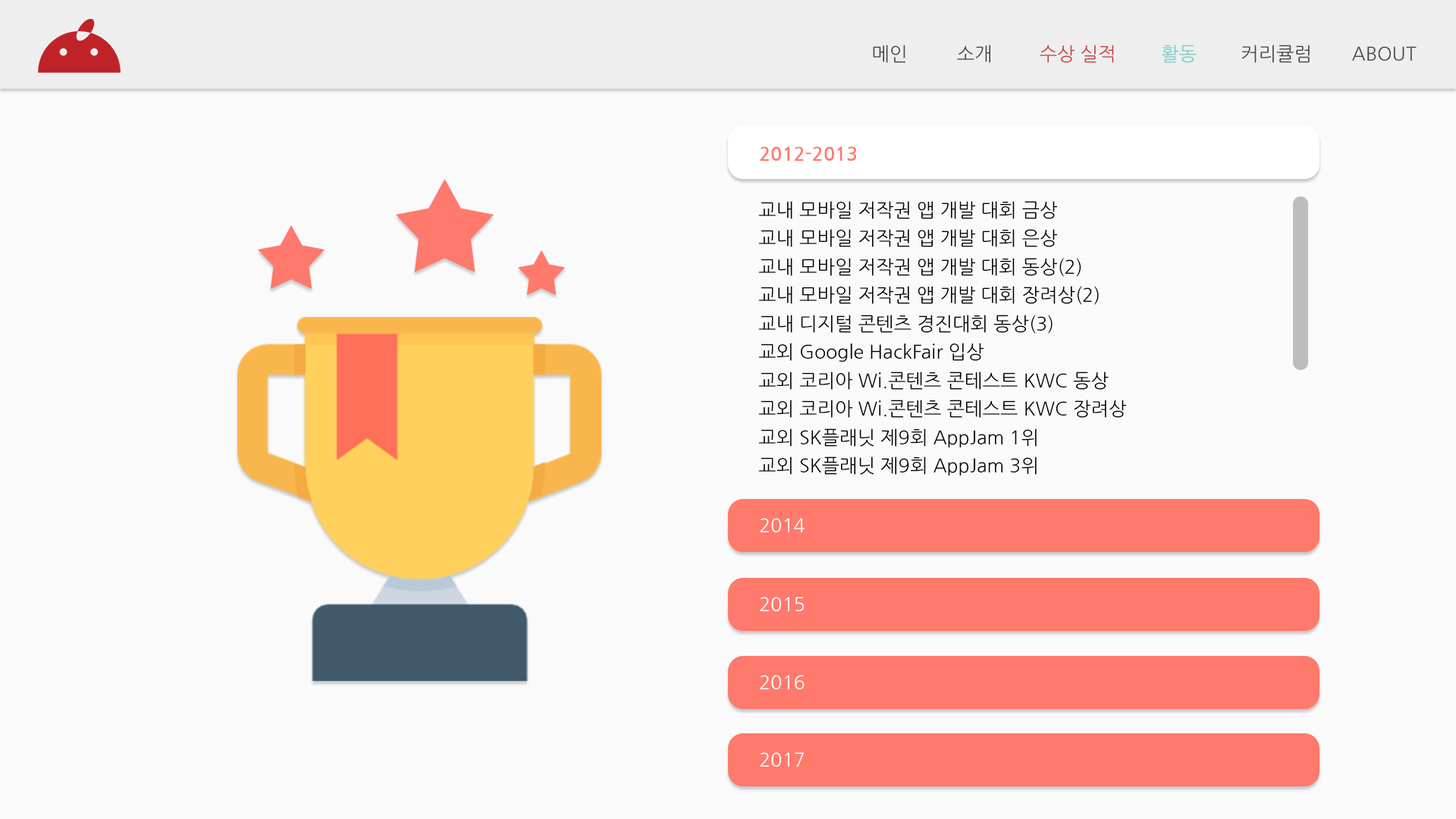
<style>
.page{position:relative;width:1456px;height:819px;background:#fafafa}
.page>*{position:absolute;margin:0}
.t1{font:19px "NanumGothic";color:#464646}
.t2{font:19px "NanumGothic";color:#cb3d3d}
.t3{font:19px "NanumGothic";color:#7accc8}
.t4{font:19px "NanumGothicBold";color:#ff796c}
.t5{font:19px/28.4px "NanumGothic";color:#000000}
.t6{font:19px "NanumGothic";color:#ffffff}
</style>
<div class="page">
<p class="t1" style="left:873px;top:45px;width:32px;height:18px">메인</p>
<p class="t1" style="left:957px;top:45px;width:33px;height:18px">소개</p>
<p class="t2" style="left:1040px;top:45px;width:74px;height:18px">수상 실적</p>
<p class="t3" style="left:1162px;top:45px;width:35px;height:18px">활동</p>
<p class="t1" style="left:1241px;top:45px;width:69px;height:18px">커리큘럼</p>
<p class="t1" style="left:1352px;top:46px;width:65px;height:15px">ABOUT</p>
<p class="t4" style="left:760px;top:146px;width:96px;height:15px">2012-2013</p>
<p class="t5" style="left:758px;top:201px;width:430px;height:331px">교내 모바일 저작권 앱 개발 대회 금상<br>교내 모바일 저작권 앱 개발 대회 은상<br>교내 모바일 저작권 앱 개발 대회 동상(2)<br>교내 모바일 저작권 앱 개발 대회 장려상(2)<br>교내 디지털 콘텐츠 경진대회 동상(3)<br>교외 Google HackFair 입상<br>교외 코리아 Wi.콘텐츠 콘테스트 KWC 동상<br>교외 코리아 Wi.콘텐츠 콘테스트 KWC 장려상<br>교외 SK플래닛 제9회 AppJam 1위<br>교외 SK플래닛 제9회 AppJam 3위<br>교외 SK플래닛 특성화고 앱개발 경진대회 본선진출(2)<br>교외 마이크로소프트 이메진컵 본선진출</p>
<p class="t6" style="left:760px;top:518px;width:45px;height:14px">2014</p>
<p class="t6" style="left:760px;top:597px;width:44px;height:14px">2015</p>
<p class="t6" style="left:760px;top:675px;width:45px;height:14px">2016</p>
<p class="t6" style="left:760px;top:752px;width:44px;height:15px">2017</p>
</div>
